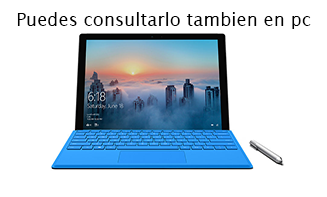
<style>
.page{position:relative;width:327px;height:197px;background:#ffffff}
.page>*{position:absolute;margin:0}
.t1{font:18px "LucidaSans";color:#000000}
</style>
<div class="page">
<p class="t1" style="left:17px;top:12px;width:294px;height:17px">Puedes consultarlo tambien en pc</p>
</div>
